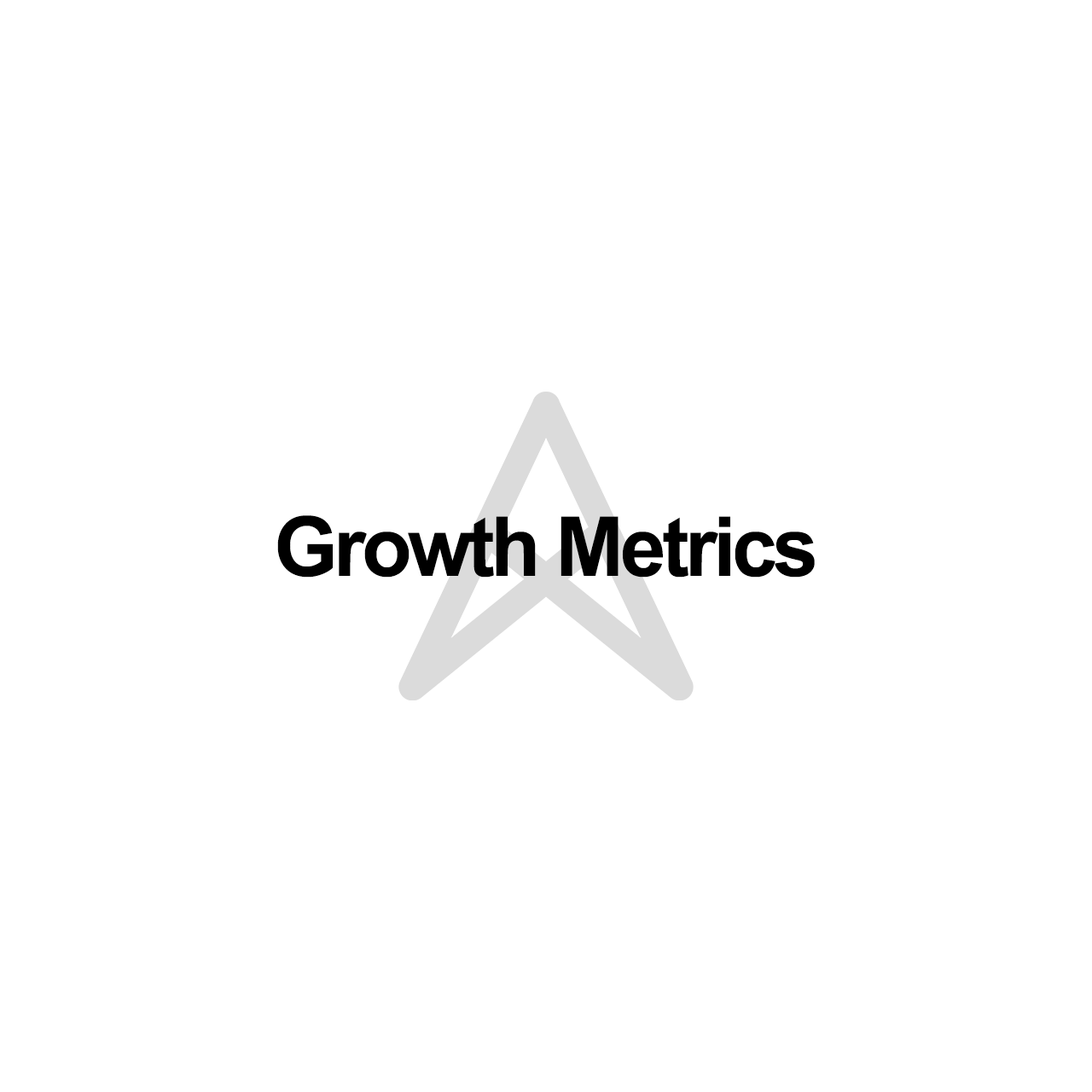
<style>
.page{position:relative;width:1092px;height:1092px;background:#ffffff}
.page>*{position:absolute;margin:0}
.t1{font:83.1px "ArialNarrow-Bold";letter-spacing:-0.04em;color:#000000;scale:1.2 1}
</style>
<div class="page">
<p class="t1" style="left:277px;top:515px;width:538px;height:63px">Growth Metrics</p>
</div>
